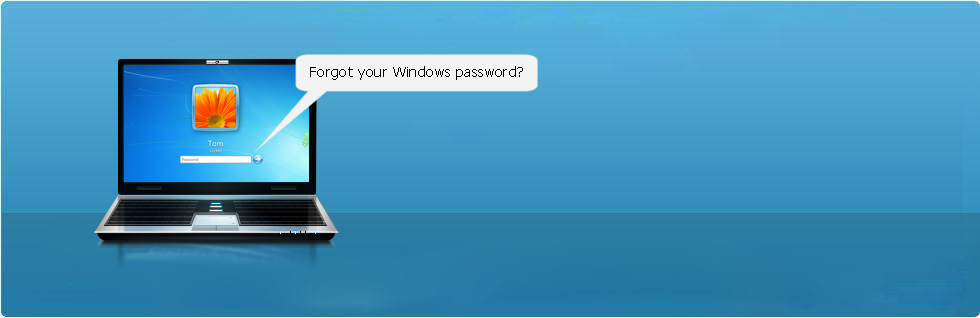
<style>
.page{position:relative;width:980px;height:318px}
.page>*{position:absolute;margin:0}
.t1{font:14px "Tahoma";letter-spacing:0.03em;color:#000000}
</style>
<div class="page">
<p class="t1" style="left:310px;top:66px;width:213px;height:14px">Forgot your Windows password?</p>
</div>
